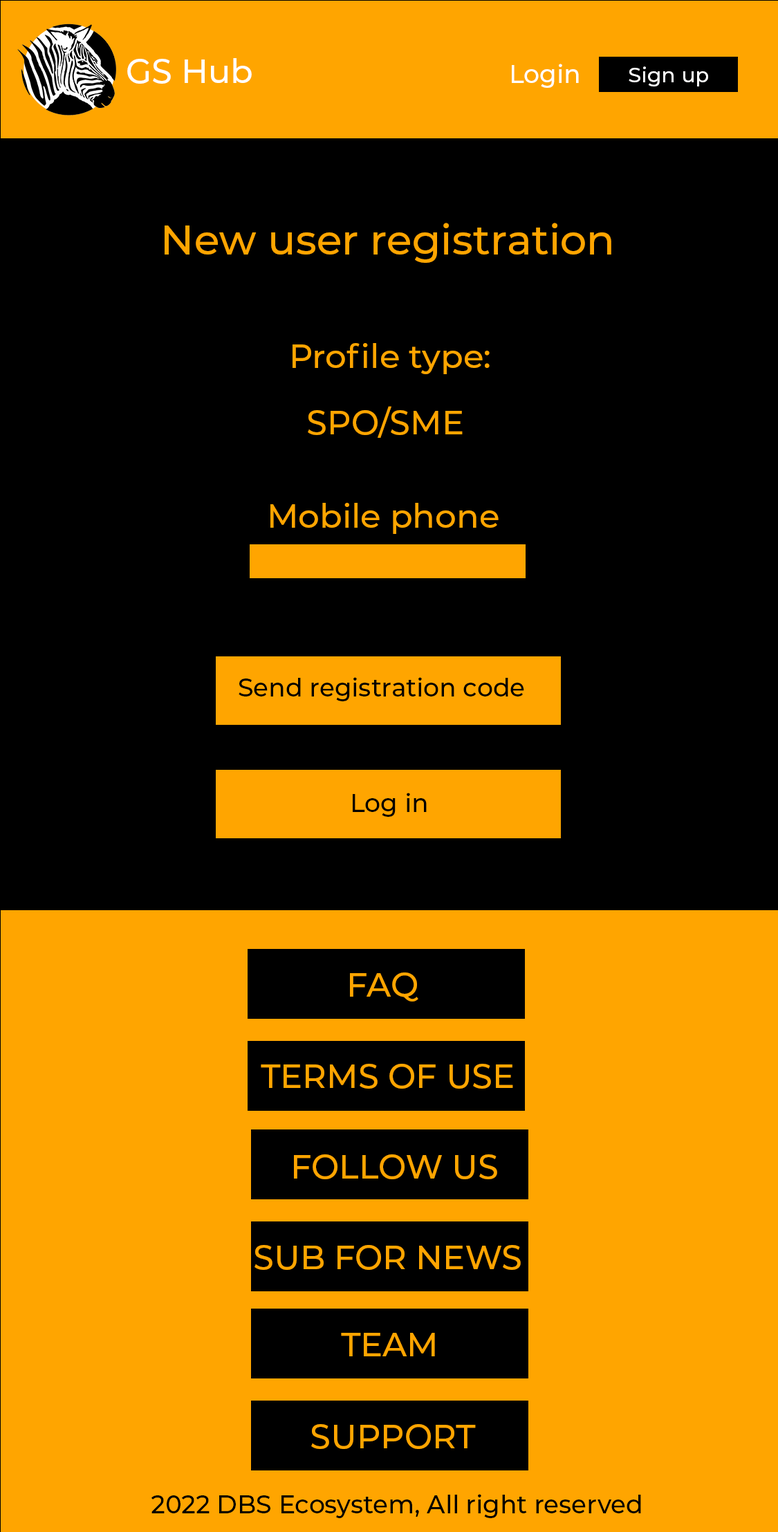
<style>
.page{position:relative;width:778px;height:1532px;background:#000000}
.page>*{position:absolute;margin:0}
.t1{font:33.2px "Montserrat-Medium";color:#ffffff}
.t2{font:24.9px "Montserrat-Medium";color:#ffffff}
.t3{font:20.8px "Montserrat-Medium";color:#ffffff}
.t4{font:41.5px "Montserrat-Medium";color:#ffa500}
.t5{font:33.2px/11.1px "Montserrat-Medium";color:#ffa500}
.t6{font:33.2px "Montserrat-Medium";color:#ffa500}
.t7{font:24.9px "Montserrat-Medium";color:#000000}
</style>
<div class="page">
<p class="t1" style="left:127px;top:58px;width:125px;height:26px">GS Hub</p>
<p class="t2" style="left:512px;top:64px;width:67px;height:24px">Login</p>
<p class="t3" style="left:629px;top:66px;width:79px;height:20px">Sign up</p>
<p class="t4" style="left:165px;top:223px;width:447px;height:40px">New user registration</p>
<p class="t5" style="left:293px;top:343px;width:197px;height:95px;text-align:justify">Profile type:             <br><br><br><br><br><br>  SPO/SME</p>
<p class="t6" style="left:270px;top:503px;width:229px;height:31px">Mobile phone</p>
<p class="t7" style="left:239px;top:677px;width:285px;height:24px">Send registration code</p>
<p class="t7" style="left:353px;top:793px;width:74px;height:24px">Log in</p>
<p class="t6" style="left:350px;top:973px;width:69px;height:29px">FAQ</p>
<p class="t6" style="left:261px;top:1064px;width:252px;height:25px">TERMS OF USE</p>
<p class="t6" style="left:294px;top:1155px;width:203px;height:24px">FOLLOW US</p>
<p class="t6" style="left:255px;top:1245px;width:266px;height:25px">SUB FOR NEWS</p>
<p class="t6" style="left:341px;top:1333px;width:94px;height:24px">TEAM</p>
<p class="t6" style="left:311px;top:1424px;width:165px;height:25px">SUPPORT</p>
<p class="t7" style="left:151px;top:1494px;width:490px;height:24px">2022 DBS Ecosystem, All right reserved</p>
</div>
